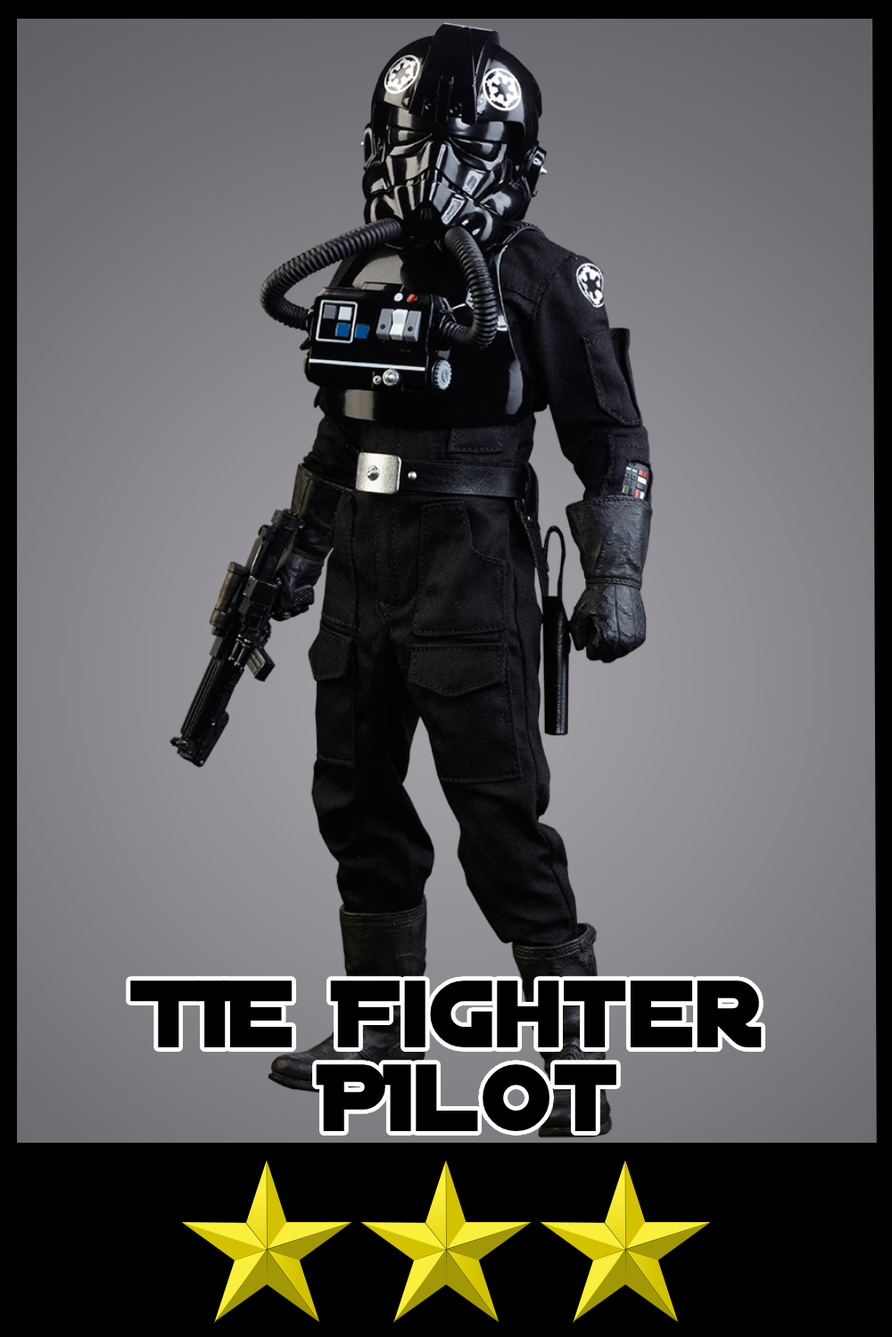
<style>
.page{position:relative;width:892px;height:1337px}
.page>*{position:absolute;margin:0}
.t1{font:102.6px/84px "DistantGalaxy";color:#000000}
</style>
<div class="page">
<p class="t1" style="left:130px;top:981px;width:631px;height:150px;text-align:center">TIE Fighter <br>PIlot</p>
</div>
